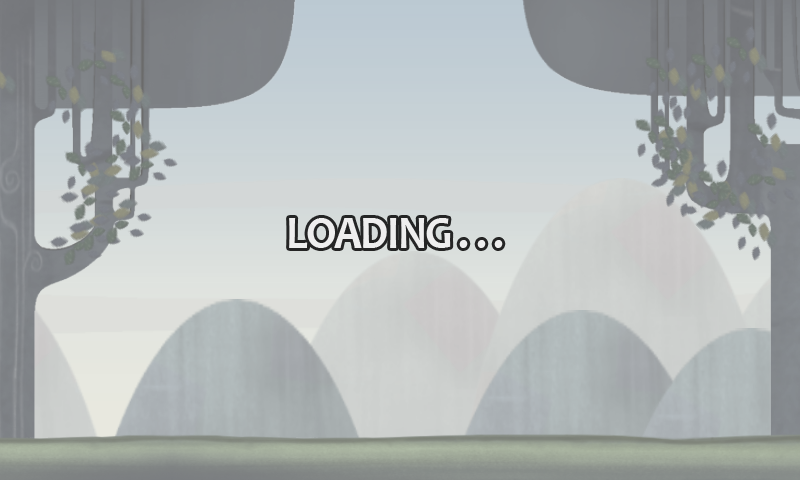
<style>
.page{position:relative;width:800px;height:480px}
.page>*{position:absolute;margin:0}
.t1{font:46.6px "Candara-Bold";letter-spacing:-0.04em;color:#eeeeee;scale:0.94 1}
</style>
<div class="page">
<p class="t1" style="left:289px;top:218px;width:214px;height:30px">LOADING . . .</p>
</div>
